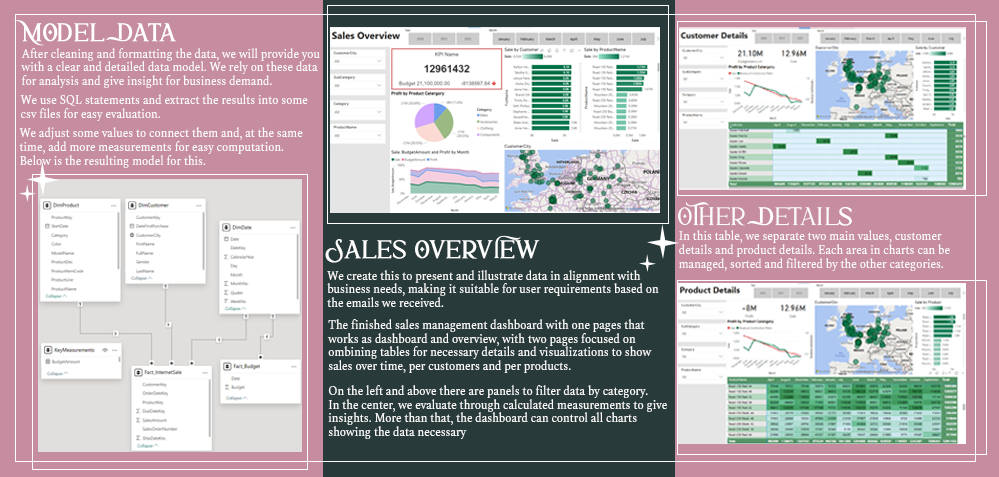
<style>
.page{position:relative;width:999px;height:477px;background:#c68c9f}
.page>*{position:absolute;margin:0}
.t1{font:20.9px "SunrollBold";color:#ffffff;font-weight:bold}
.t2{font:11.4px "#9Slide04Spectral";color:#fbfbfb}
.t3{font:20.9px "SunrollBold";color:#fbfbfb}
.t4{font:20.9px "SunrollBold";color:#ffffff}
</style>
<div class="page">
<p class="t1" style="left:14px;top:20px;width:162px;height:26px">MOdel  Data</p>
<p class="t2" style="left:21px;top:48px;width:299px;height:40px">After cleaning and formatting the data, we will provide you<br>with a clear and detailed data model. We rely on these data <br>for analysis and give insight for business demand.</p>
<p class="t2" style="left:20px;top:94px;width:288px;height:27px">We use SQL statements and extract the results into some <br>csv files for easy evaluation.</p>
<p class="t2" style="left:19px;top:127px;width:284px;height:41px">We adjust some values ​​to connect them and, at the same <br>time, add more measurements for easy computation. <br>Below is the resulting model for this.</p>
<p class="t3" style="left:678px;top:202px;width:174px;height:24px"><span class="t4">OT</span>her  <span class="t1">D</span>etail<span class="t1">s</span></p>
<p class="t2" style="left:679px;top:230px;width:271px;height:41px">In this table, we separate two main values, customer <br>details and product details. Each area in charts can be <br>managed, sorted and filtered by the other categories.</p>
<p class="t1" style="left:325px;top:235px;width:215px;height:28px">Sales Overv<span class="t4">I</span>ew</p>
<p class="t2" style="left:327px;top:270px;width:332px;height:37px">We create this to present and illustrate data in alignment with <br>business needs, making it suitable for user requirements based on <br>the emails we received.</p>
<p class="t2" style="left:327px;top:319px;width:325px;height:54px">The finished sales management dashboard with one pages that <br>works as dashboard and overview, with two pages focused on <br>ombining tables for necessary details and visualizations to show <br>sales over time, per customers and per products.</p>
<p class="t2" style="left:328px;top:385px;width:339px;height:54px">On the left and above there are panels to filter data by category. <br>In the center, we evaluate through calculated measurements to give<br>insights. More than that, the dashboard can control all charts <br>showing the data necessary</p>
</div>
